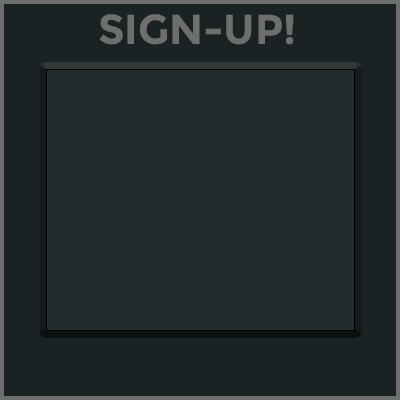
<style>
.page{position:relative;width:400px;height:400px;background:#222b2e}
.page>*{position:absolute;margin:0}
.t1{font:41.7px "Montserrat-Bold";color:#6e6e6e}
</style>
<div class="page">
<p class="t1" style="left:99px;top:14px;width:195px;height:31px">SIGN-UP!</p>
</div>
